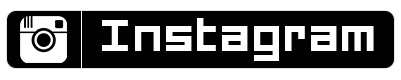
<style>
.page{position:relative;width:401px;height:80px;background:#010101}
.page>*{position:absolute;margin:0}
.t1{font:60px "FORCED-SQUARE";color:#fefefe}
</style>
<div class="page">
<p class="t1" style="left:102px;top:18px;width:272px;height:43px">Instagram</p>
</div>
